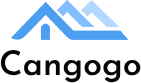
<style>
.page{position:relative;width:141px;height:83px;background:#ffffff}
.page>*{position:absolute;margin:0}
.t1{font:34px "JosefinSans-SemiBold";color:#060606}
</style>
<div class="page">
<p class="t1" style="left:0px;top:49px;width:141px;height:34px">Cangogo</p>
</div>
